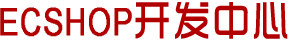
<style>
.page{position:relative;width:289px;height:42px;background:#ffffff}
.page>*{position:absolute;margin:0}
.t1{font:43.6px "TRENDS";letter-spacing:0.06em;color:#b20000;font-weight:bold;scale:0.83 1}
.t2{font:37.6px "Small Fonts";letter-spacing:0.06em;color:#b20000;font-weight:bold;scale:0.79 1}
</style>
<div class="page">
<p class="t1" style="left:135px;top:2px;width:153px;height:37px">开发中心</p>
<p class="t2" style="left:0px;top:7px;width:132px;height:30px">ECSHOP</p>
</div>
